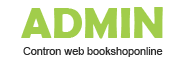
<style>
.page{position:relative;width:188px;height:61px;background:#ffffff}
.page>*{position:absolute;margin:0}
.t1{font:44.4px "BerlinSansFBDemi-Bold";letter-spacing:-0.01em;color:#a1cd4b}
.t2{font:11px "ArialMT";letter-spacing:-0.01em;color:#2e2e2e}
</style>
<div class="page">
<p class="t1" style="left:21px;top:7px;width:142px;height:32px">ADMIN</p>
<p class="t2" style="left:23px;top:47px;width:140px;height:10px">Contron web bookshoponline</p>
</div>
